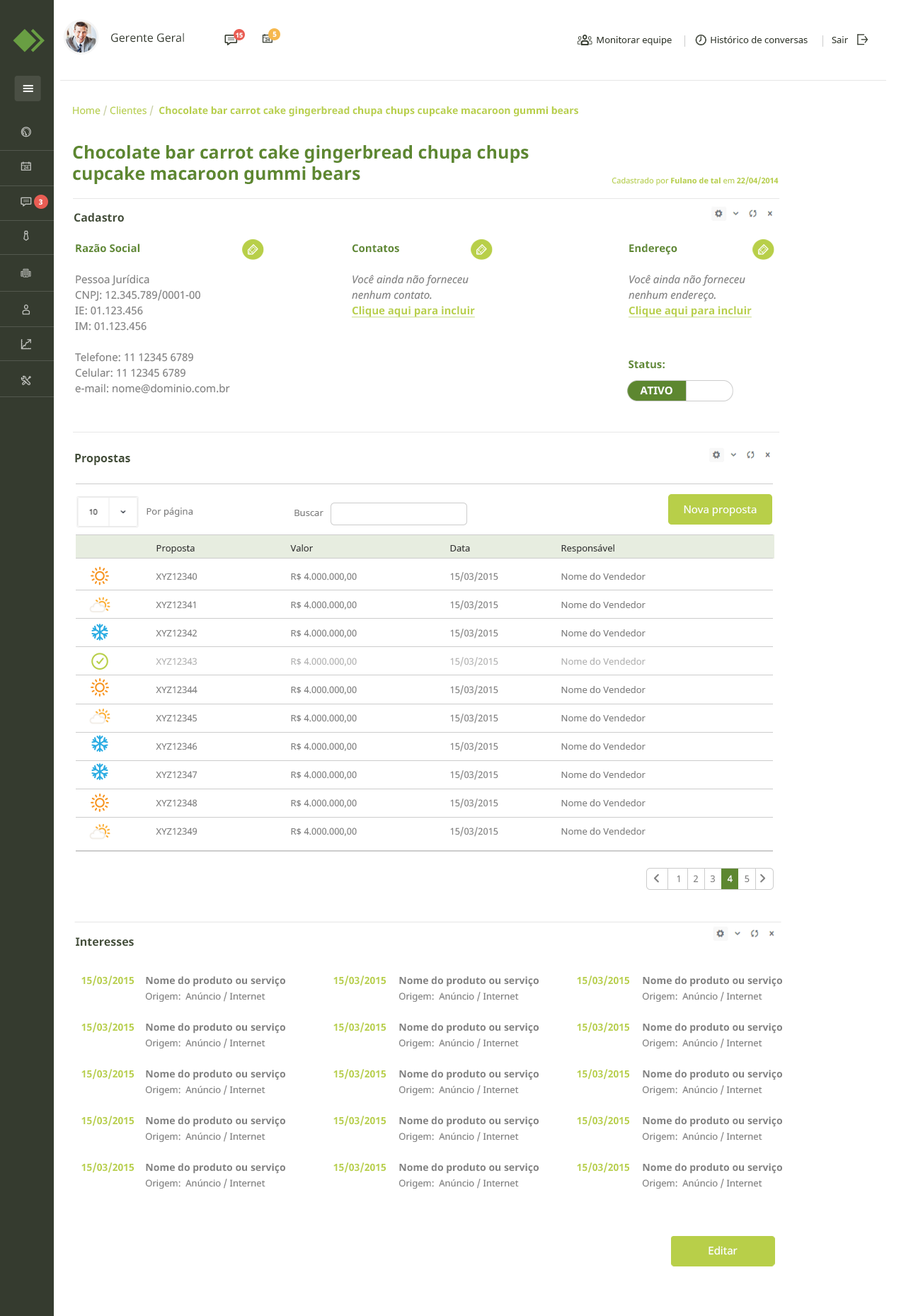
<style>
.page{position:relative;width:906px;height:1316px;background:#ffffff}
.page>*{position:absolute;margin:0}
.t1{font:11.3px "NotoSans";color:#353b2f}
.t2{font:6.4px "NotoSans-Bold";color:#ffffff}
.t3{font:7.1px "NotoSans-Bold";color:#ffffff}
.t4{font:9.2px "NotoSans";color:#353b2f}
.t5{font:9.9px "NotoSans-Bold";color:#b8cf49}
.t6{font:9.9px "NotoSans";color:#b8cf49}
.t7{font:9.9px "NotoSans";color:#c7cfa1}
.t8{font:17.7px "NotoSans-Bold";color:#5d8730}
.t9{font:7.8px "NotoSans";color:#b8cf49}
.t10{font:7.8px "NotoSans-Bold";color:#b8cf49}
.t11{font:11.3px "NotoSans-Bold";color:#424d38}
.t12{font:10.6px/15.6px "NotoSans";color:#808080}
.t13{font:10.6px/15.6px "NotoSans-Bold";color:#5d8730}
.t14{font:10.6px/15.6px "NotoSans-Italic";color:#808080}
.t15{font:10.6px/15.6px "NotoSans-Bold";color:#b8cf49;text-decoration:underline}
.t16{font:10.6px "NotoSans-Bold";color:#5d8730}
.t17{font:10.6px "NotoSans-Bold";color:#ffffff}
.t18{font:9.2px "NotoSans";color:#808080}
.t19{font:10.6px "NotoSans";color:#ffffff}
.t20{font:9.2px/28.3px "NotoSans";color:#808080}
.t21{font:9.2px/28.3px "NotoSans";color:#333333}
.t22{font:9.2px/28.3px "NotoSans";color:#b3b3b3}
.t23{font:9.9px/15.6px "NotoSans-Bold";color:#b8cf49}
.t24{font:9.2px/15.6px "NotoSans";color:#808080}
.t25{font:9.9px/15.6px "NotoSans-Bold";color:#808080}
</style>
<div class="page">
<p class="t1" style="left:111px;top:33px;width:73px;height:9px">Gerente Geral</p>
<p class="t2" style="left:236px;top:33px;width:7px;height:5px">15</p>
<p class="t3" style="left:273px;top:31px;width:4px;height:7px">5</p>
<p class="t4" style="left:597px;top:36px;width:251px;height:9px">Monitorar equipe                Histórico de conversas          Sair</p>
<p class="t5" style="left:73px;top:105px;width:505px;height:12px"><span class="t6">Home </span><span class="t7">/</span><span class="t6"> Clientes </span><span class="t7">/  </span>Chocolate bar carrot cake gingerbread chupa chups cupcake macaroon gummi bears</p>
<p class="t8" style="left:73px;top:145px;width:456px;height:39px">Chocolate bar carrot cake gingerbread chupa chups cupcake macaroon gummi bears</p>
<p class="t9" style="left:612px;top:176px;width:167px;height:9px">Cadastrado por<span class="t10"> Fulano de tal </span>em<span class="t10"> 22/04/2014</span></p>
<p class="t3" style="left:39px;top:199px;width:3px;height:6px">3</p>
<p class="t11" style="left:74px;top:212px;width:50px;height:10px">Cadastro</p>
<p class="t12" style="left:75px;top:244px;width:155px;height:150px"><span class="t13">Razão Social<br><br></span>Pessoa Jurídica<br>CNPJ: 12.345.789/0001-00<br>IE: 01.123.456<br>IM: 01.123.456<br><br>Telefone: 11 12345 6789<br>Celular: 11 12345 6789<br>e-mail: nome@dominio.com.br</p>
<p class="t14" style="left:351px;top:244px;width:124px;height:74px"><span class="t13">Contatos<br><br></span>Você ainda não forneceu <br>nenhum contato.<br><span class="t15">Clique aqui para incluir</span></p>
<p class="t14" style="left:628px;top:244px;width:124px;height:74px"><span class="t13">Endereço<br><br></span>Você ainda não forneceu <br>nenhum endereço.<br><span class="t15">Clique aqui para incluir</span></p>
<p class="t16" style="left:629px;top:360px;width:36px;height:9px">Status:</p>
<p class="t17" style="left:640px;top:387px;width:33px;height:8px">ATIVO</p>
<p class="t11" style="left:75px;top:454px;width:55px;height:11px">Propostas</p>
<p class="t18" style="left:147px;top:508px;width:46px;height:9px">Por página</p>
<p class="t18" style="left:294px;top:510px;width:30px;height:6px">Buscar</p>
<p class="t19" style="left:684px;top:505px;width:73px;height:11px">Nova proposta</p>
<p class="t20" style="left:156px;top:545px;width:42px;height:290px"><span class="t21">Proposta<br></span>XYZ12340<br>XYZ12341<br>XYZ12342<br><span class="t22">XYZ12343<br></span>XYZ12344<br>XYZ12345<br>XYZ12346<br>XYZ12347<br>XYZ12348<br>XYZ12349</p>
<p class="t20" style="left:290px;top:544px;width:67px;height:292px"><span class="t21">Valor<br></span>R$ 4.000.000,00<br>R$ 4.000.000,00<br>R$ 4.000.000,00<br><span class="t22">R$ 4.000.000,00<br></span>R$ 4.000.000,00<br>R$ 4.000.000,00<br>R$ 4.000.000,00<br>R$ 4.000.000,00<br>R$ 4.000.000,00<br>R$ 4.000.000,00</p>
<p class="t20" style="left:450px;top:545px;width:48px;height:292px"><span class="t21">Data<br></span>15/03/2015<br>15/03/2015<br>15/03/2015<br><span class="t22">15/03/2015<br></span>15/03/2015<br>15/03/2015<br>15/03/2015<br>15/03/2015<br>15/03/2015<br>15/03/2015</p>
<p class="t20" style="left:561px;top:544px;width:85px;height:291px"><span class="t21">Responsável<br></span>Nome do Vendedor<br>Nome do Vendedor<br>Nome do Vendedor<br><span class="t22">Nome do Vendedor<br></span>Nome do Vendedor<br>Nome do Vendedor<br>Nome do Vendedor<br>Nome do Vendedor<br>Nome do Vendedor<br>Nome do Vendedor</p>
<p class="t11" style="left:76px;top:937px;width:58px;height:9px">Interesses</p>
<p class="t23" style="left:81px;top:975px;width:53px;height:198px;text-align:right">15/03/2015<br><br><br>15/03/2015<br><br><br>15/03/2015 <br><br><br>15/03/2015<br><br><br>15/03/2015</p>
<p class="t24" style="left:145px;top:976px;width:140px;height:213px"><span class="t25">Nome do produto ou serviço   <br></span>Origem:  Anúncio / Internet<br><br><span class="t25">Nome do produto ou serviço   <br></span>Origem:  Anúncio / Internet<br><br><span class="t25">Nome do produto ou serviço   <br></span>Origem:  Anúncio / Internet<br><br><span class="t25">Nome do produto ou serviço   <br></span>Origem:  Anúncio / Internet<br><br><span class="t25">Nome do produto ou serviço   <br></span>Origem:  Anúncio / Internet</p>
<p class="t23" style="left:333px;top:975px;width:53px;height:198px;text-align:right">15/03/2015<br><br><br>15/03/2015<br><br><br>15/03/2015 <br><br><br>15/03/2015<br><br><br>15/03/2015</p>
<p class="t24" style="left:399px;top:976px;width:140px;height:213px"><span class="t25">Nome do produto ou serviço   <br></span>Origem:  Anúncio / Internet<br><br><span class="t25">Nome do produto ou serviço   <br></span>Origem:  Anúncio / Internet<br><br><span class="t25">Nome do produto ou serviço   <br></span>Origem:  Anúncio / Internet<br><br><span class="t25">Nome do produto ou serviço   <br></span>Origem:  Anúncio / Internet<br><br><span class="t25">Nome do produto ou serviço   <br></span>Origem:  Anúncio / Internet</p>
<p class="t23" style="left:577px;top:975px;width:52px;height:198px;text-align:right">15/03/2015<br><br><br>15/03/2015<br><br><br>15/03/2015 <br><br><br>15/03/2015<br><br><br>15/03/2015</p>
<p class="t24" style="left:642px;top:976px;width:140px;height:213px"><span class="t25">Nome do produto ou serviço   <br></span>Origem:  Anúncio / Internet<br><br><span class="t25">Nome do produto ou serviço   <br></span>Origem:  Anúncio / Internet<br><br><span class="t25">Nome do produto ou serviço   <br></span>Origem:  Anúncio / Internet<br><br><span class="t25">Nome do produto ou serviço   <br></span>Origem:  Anúncio / Internet<br><br><span class="t25">Nome do produto ou serviço   <br></span>Origem:  Anúncio / Internet</p>
<p class="t19" style="left:709px;top:1246px;width:29px;height:9px">Editar</p>
</div>
